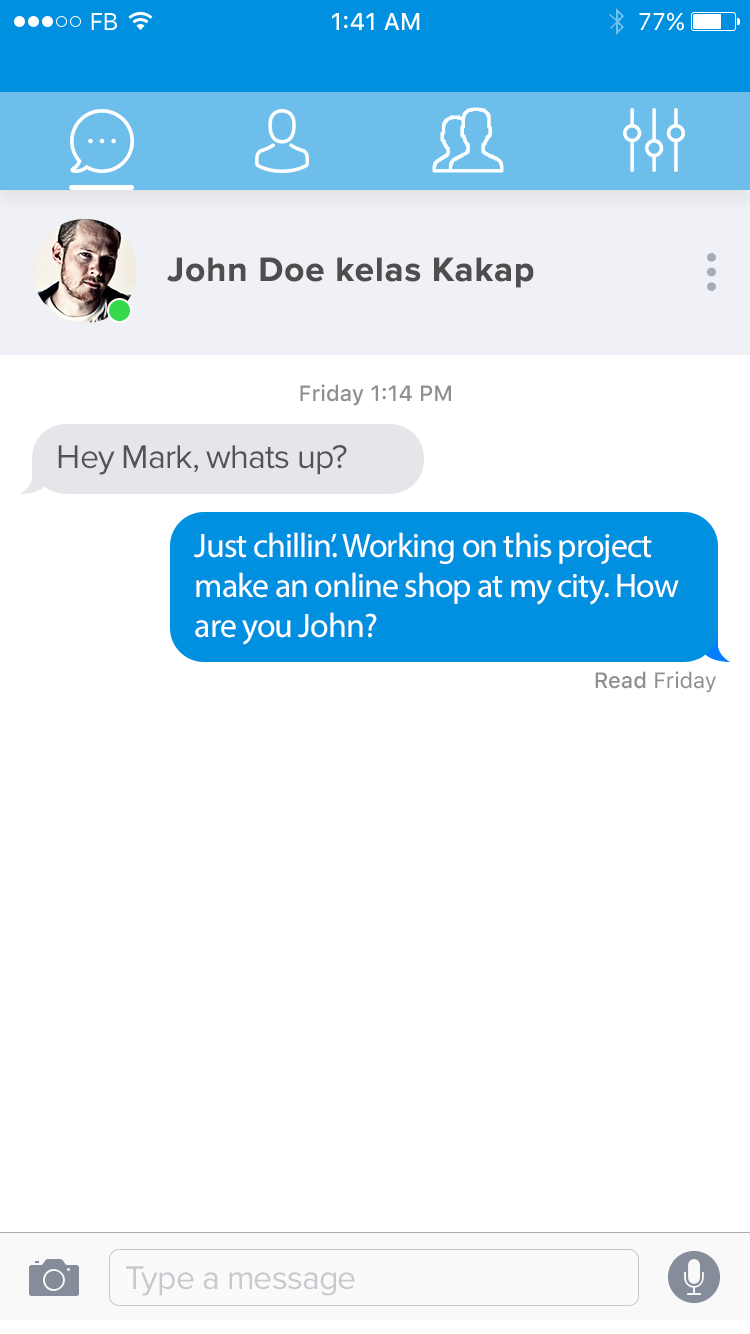
<style>
.page{position:relative;width:750px;height:1334px;background:#ffffff}
.page>*{position:absolute;margin:0}
.t1{font:24px "SFUIText-Regular";letter-spacing:-0.025em;color:#ffffff}
.t2{font:24px "SFUIText-Medium";color:#ffffff}
.t3{font:24px "SFUIText-Regular";color:#ffffff}
.t4{font:35px "ProximaNova-Bold";letter-spacing:0.025em;color:#4f4e4e}
.t5{font:22px "SFUIText-Medium";color:#8e8e93}
.t6{font:34px "ProximaNova-Regular";letter-spacing:-0.028em;color:#535353}
.t7{font:34px/40px "MyriadPro-Regular";letter-spacing:-0.028em;color:#ffffff}
.t8{font:22px "SFUIText-Regular";color:#8e8e93}
.t9{font:34px "ProximaNova-Regular";letter-spacing:-0.025em;color:#c8c8ce}
</style>
<div class="page">
<p class="t1" style="left:91px;top:13px;width:26px;height:17px">FB</p>
<p class="t2" style="left:332px;top:13px;width:88px;height:17px">1:41 AM</p>
<p class="t3" style="left:639px;top:12px;width:45px;height:19px">77%</p>
<p class="t4" style="left:167px;top:257px;width:367px;height:31px">John Doe kelas Kakap</p>
<p class="t5" style="left:300px;top:384px;width:151px;height:22px">Friday 1:14 PM</p>
<p class="t6" style="left:58px;top:445px;width:289px;height:30px">Hey Mark, whats up?</p>
<p class="t7" style="left:194px;top:532px;width:485px;height:113px">Just chillin’. Working on this project make an online shop at my city. How are you John?</p>
<p class="t8" style="left:595px;top:671px;width:121px;height:22px"><span class="t5">Read </span>Friday</p>
<p class="t9" style="left:126px;top:1266px;width:229px;height:30px">Type a message</p>
</div>
